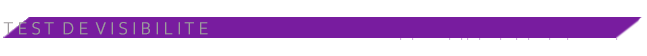
<style>
.page{position:relative;width:647px;height:56px;background:#ffffff}
.page>*{position:absolute;margin:0}
.t1{font:18px "CorbelLight";color:#9e9a9c;font-weight:bold}
</style>
<div class="page">
<p class="t1" style="left:3px;top:22px;width:205px;height:13px">T E S T  D E  V I S I B I L I T E</p>
</div>
